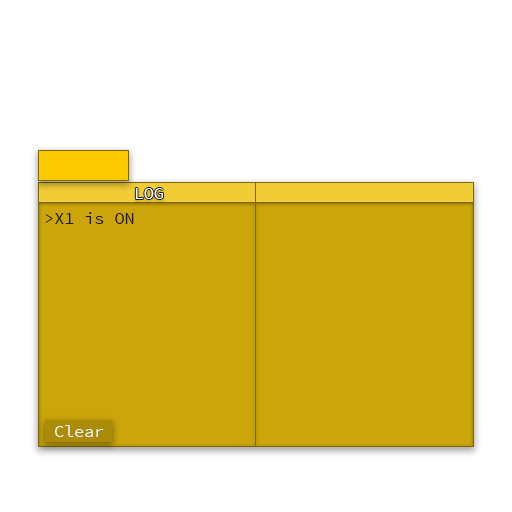
<style>
.page{position:relative;width:512px;height:512px;background:#ffffff}
.page>*{position:absolute;margin:0}
.t1{font:16.7px "SourceCodePro-Regular";color:#ffffff}
.t2{font:16.7px "SourceCodePro-Regular";color:#1b1a1a}
.t3{font:16.7px "SourceCodePro-Regular";color:#f5f5f5}
</style>
<div class="page">
<p class="t1" style="left:135px;top:188px;width:28px;height:11px">LOG</p>
<p class="t2" style="left:45px;top:212px;width:89px;height:12px">&gt;X1 is ON</p>
<p class="t3" style="left:55px;top:425px;width:49px;height:12px">Clear</p>
</div>
